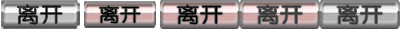
<style>
.page{position:relative;width:400px;height:29px}
.page>*{position:absolute;margin:0}
.t1{font:20px "YouYuan";color:#000000;font-weight:bold;scale:1.14 1}
.t2{font:18px "YouYuan";color:#000000;font-weight:bold;scale:1.14 1}
.t3{font:20px "YouYuan";color:#353535;font-weight:bold;scale:1.14 1}
</style>
<div class="page">
<p class="t1" style="left:17px;top:4px;width:46px;height:21px">离开</p>
<p class="t2" style="left:99px;top:5px;width:41px;height:19px">离开</p>
<p class="t1" style="left:177px;top:4px;width:46px;height:21px">离开</p>
<p class="t3" style="left:257px;top:4px;width:46px;height:21px">离开</p>
<p class="t3" style="left:337px;top:4px;width:46px;height:21px">离开</p>
</div>
